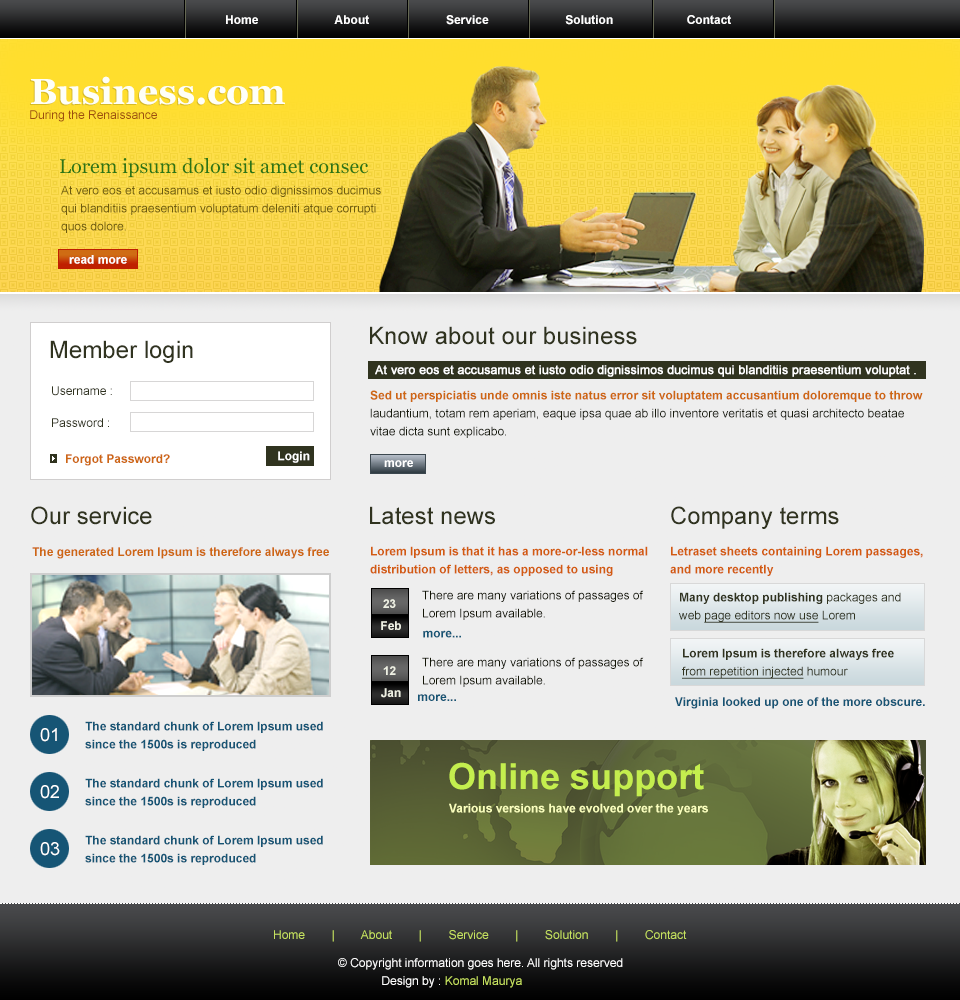
<style>
.page{position:relative;width:960px;height:1000px;background:#eeeeee}
.page>*{position:absolute;margin:0}
.t1{font:12px "Arial-BoldMT";color:#ffffff}
.t2{font:36px "Georgia-Bold";color:#fefff8}
.t3{font:12px "ArialMT";color:#9e4f0e}
.t4{font:20px "Georgia";color:#2c7516}
.t5{font:12px/18px "ArialMT";color:#6d5b0f}
.t6{font:24px "ArialMT";color:#30331f}
.t7{font:12px "ArialMT";color:#ffffff;font-weight:bold}
.t8{font:12px "ArialMT";color:#30331f}
.t9{font:12px/18px "ArialMT";color:#181b0e}
.t10{font:12px/18px "Arial-BoldMT";color:#ce6712}
.t11{font:12px "Arial-BoldMT";color:#ce6712}
.t12{font:12px/18px "Arial-BoldMT";color:#d35c10}
.t13{font:12px/18px "ArialMT";color:#131506}
.t14{font:12px/18px "Arial-BoldMT";color:#30331f}
.t15{font:12px/18px "ArialMT";color:#30331f}
.t16{font:12px/18px "ArialMT";color:#30331f;text-decoration:underline}
.t17{font:12px/22px "Arial-BoldMT";color:#eef0e3}
.t18{font:12px "Arial-BoldMT";color:#165575}
.t19{font:12px/18px "Arial-BoldMT";color:#165575}
.t20{font:18px "ArialMT";color:#ffffff}
.t21{font:36px "Arial-BoldMT";color:#c4ee4e}
.t22{font:12px "Arial-BoldMT";color:#faffbd}
.t23{font:12px "ArialMT";color:#c6e260}
.t24{font:12px/18px "ArialMT";color:#ffffff}
.t25{font:12px/18px "ArialMT";color:#c6e260}
</style>
<div class="page">
<p class="t1" style="left:226px;top:15px;width:505px;height:10px">Home                       About                       Service                       Solution                      Contact</p>
<p class="t2" style="left:31px;top:76px;width:254px;height:29px">Business.com</p>
<p class="t3" style="left:30px;top:110px;width:127px;height:12px">During the Renaissance</p>
<p class="t4" style="left:60px;top:158px;width:309px;height:20px">Lorem ipsum dolor sit amet consec</p>
<p class="t5" style="left:61px;top:185px;width:320px;height:48px">At vero eos et accusamus et iusto odio dignissimos ducimus qui blanditiis praesentium voluptatum deleniti atque corrupti quos dolore.</p>
<p class="t1" style="left:69px;top:255px;width:58px;height:9px">read more</p>
<p class="t6" style="left:370px;top:326px;width:267px;height:19px">Know about our business</p>
<p class="t6" style="left:50px;top:340px;width:143px;height:23px">Member login</p>
<p class="t7" style="left:375px;top:365px;width:541px;height:12px">At vero eos et accusamus et iusto odio dignissimos ducimus qui blanditiis praesentium voluptat .</p>
<p class="t8" style="left:52px;top:386px;width:60px;height:10px">Username :</p>
<p class="t9" style="left:370px;top:390px;width:553px;height:48px"><span class="t10">Sed ut perspiciatis unde omnis iste natus error sit voluptatem accusantium doloremque to throw </span>laudantium, totam rem aperiam, eaque ipsa quae ab illo inventore veritatis et quasi architecto beatae vitae dicta sunt explicabo.</p>
<p class="t8" style="left:52px;top:418px;width:57px;height:9px">Password :</p>
<p class="t11" style="left:66px;top:454px;width:104px;height:12px">Forgot Password?</p>
<p class="t1" style="left:278px;top:451px;width:32px;height:12px">Login</p>
<p class="t1" style="left:384px;top:460px;width:29px;height:7px">more</p>
<p class="t6" style="left:31px;top:506px;width:121px;height:19px">Our service</p>
<p class="t6" style="left:370px;top:506px;width:125px;height:19px">Latest news</p>
<p class="t6" style="left:671px;top:506px;width:168px;height:23px">Company terms</p>
<p class="t11" style="left:32px;top:547px;width:297px;height:12px">The generated Lorem Ipsum is therefore always free</p>
<p class="t12" style="left:370px;top:546px;width:278px;height:30px">Lorem Ipsum is that it has a more-or-less normal distribution of letters, as opposed to using</p>
<p class="t12" style="left:670px;top:546px;width:253px;height:30px">Letraset sheets containing Lorem passages, and more recently</p>
<p class="t13" style="left:422px;top:590px;width:222px;height:30px">There are many variations of passages of Lorem Ipsum available.</p>
<p class="t14" style="left:679px;top:592px;width:222px;height:31px">Many desktop publishing<span class="t15"> packages and web </span><span class="t16">page editors now use</span><span class="t15"> Lorem</span></p>
<p class="t17" style="left:381px;top:599px;width:20px;height:31px;text-align:center">23 <br>Feb</p>
<p class="t18" style="left:423px;top:630px;width:38px;height:8px">more...</p>
<p class="t14" style="left:682px;top:648px;width:212px;height:31px">Lorem Ipsum is therefore always free <span class="t16">from repetition injected</span><span class="t15"> humour</span></p>
<p class="t13" style="left:422px;top:657px;width:222px;height:30px">There are many variations of passages of Lorem Ipsum available.</p>
<p class="t17" style="left:381px;top:666px;width:20px;height:32px;text-align:center">12 <br>Jan</p>
<p class="t18" style="left:418px;top:694px;width:38px;height:7px">more...</p>
<p class="t18" style="left:675px;top:697px;width:250px;height:12px">Virginia looked up one of the more obscure.</p>
<p class="t19" style="left:85px;top:721px;width:238px;height:30px">The standard chunk of Lorem Ipsum used since the 1500s is reproduced</p>
<p class="t20" style="left:40px;top:728px;width:17px;height:14px">01</p>
<p class="t21" style="left:449px;top:762px;width:255px;height:35px">Online support</p>
<p class="t20" style="left:40px;top:785px;width:19px;height:14px">02</p>
<p class="t19" style="left:85px;top:778px;width:238px;height:30px">The standard chunk of Lorem Ipsum used since the 1500s is reproduced</p>
<p class="t22" style="left:449px;top:803px;width:259px;height:12px">Various versions have evolved over the years</p>
<p class="t20" style="left:40px;top:842px;width:20px;height:14px">03</p>
<p class="t19" style="left:85px;top:835px;width:238px;height:30px">The standard chunk of Lorem Ipsum used since the 1500s is reproduced</p>
<p class="t23" style="left:274px;top:930px;width:413px;height:12px">Home        |        About        |        Service        |        Solution        |        Contact</p>
<p class="t24" style="left:338px;top:958px;width:285px;height:30px">© Copyright information goes here. All rights reserved<br>             Design by :<span class="t25"> Komal Maurya</span></p>
</div>
